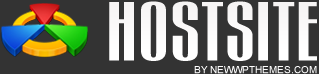
<style>
.page{position:relative;width:319px;height:74px;background:#333333}
.page>*{position:absolute;margin:0}
.t1{font:72px "Gogobig";letter-spacing:0.025em;color:#ffffff;text-transform:uppercase}
.t2{font:10px "ArialMT";color:#ffffff;text-transform:uppercase}
</style>
<div class="page">
<p class="t1" style="left:109px;top:1px;width:208px;height:60px">HostSite</p>
<p class="t2" style="left:194px;top:66px;width:123px;height:8px">by NewWpThemes.com</p>
</div>
